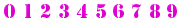
<style>
.page{position:relative;width:180px;height:21px;background:#ffffff}
.page>*{position:absolute;margin:0}
.t1{font:18px "StencilStd";color:#e100d4}
.t2{font:18px "StencilStd";color:#e000d3}
.t3{font:18px "StencilStd";color:#e101d4}
</style>
<div class="page">
<p class="t1" style="left:4px;top:4px;width:11px;height:14px">0</p>
<p class="t2" style="left:25px;top:4px;width:7px;height:14px">1</p>
<p class="t2" style="left:41px;top:4px;width:10px;height:14px">2</p>
<p class="t2" style="left:59px;top:4px;width:10px;height:14px">3</p>
<p class="t1" style="left:76px;top:4px;width:12px;height:14px">4</p>
<p class="t2" style="left:96px;top:4px;width:10px;height:14px">5</p>
<p class="t3" style="left:113px;top:4px;width:11px;height:14px">6</p>
<p class="t2" style="left:132px;top:4px;width:9px;height:14px">7</p>
<p class="t1" style="left:150px;top:4px;width:10px;height:14px">8</p>
<p class="t2" style="left:167px;top:4px;width:10px;height:14px">9</p>
</div>
